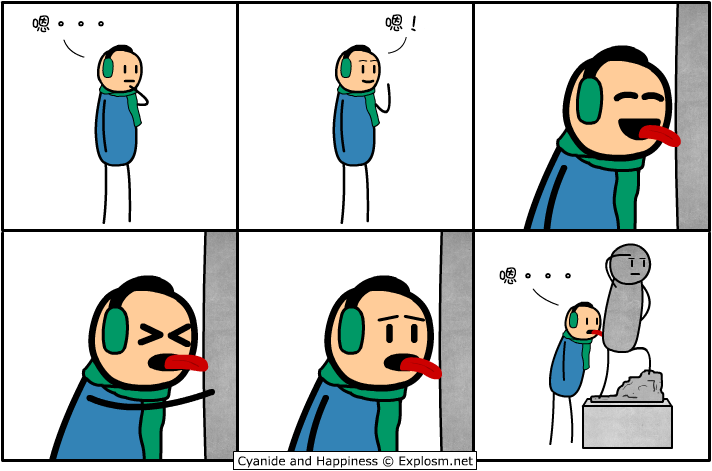
<style>
.page{position:relative;width:712px;height:471px;background:#ffffff}
.page>*{position:absolute;margin:0}
.t1{font:20px "DFGirl";color:#000000}
</style>
<div class="page">
<p class="t1" style="left:32px;top:15px;width:72px;height:18px">嗯。。。</p>
<p class="t1" style="left:385px;top:14px;width:31px;height:18px">嗯！</p>
<p class="t1" style="left:499px;top:267px;width:72px;height:18px">嗯。。。</p>
</div>
